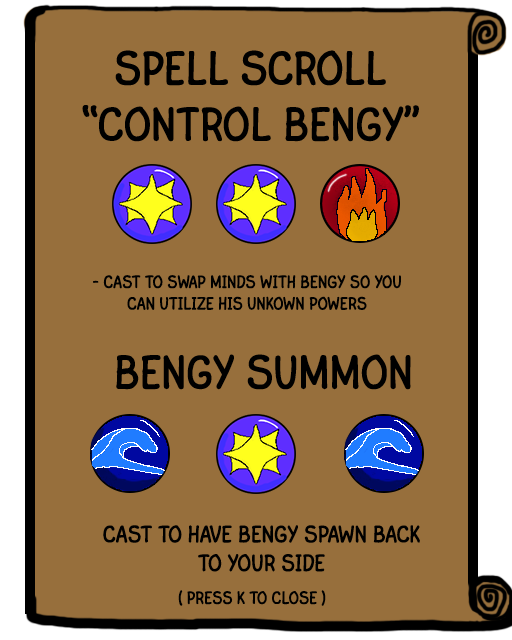
<style>
.page{position:relative;width:512px;height:640px;background:#976f3c}
.page>*{position:absolute;margin:0}
.t1{font:48px "FinaleCopyistTextExt";color:#000000;text-transform:uppercase}
.t2{font:18px "FinaleCopyistTextExt";color:#000000;text-transform:uppercase}
.t3{font:24px "FinaleCopyistTextExt";color:#000000;text-transform:uppercase}
</style>
<div class="page">
<p class="t1" style="left:82px;top:105px;width:337px;height:37px">“Control bengy”</p>
<p class="t2" style="left:93px;top:275px;width:308px;height:35px;text-align:center">- Cast to swap minds with bengy so you can utilize his unkown powers</p>
<p class="t1" style="left:116px;top:354px;width:295px;height:36px">Bengy Summon</p>
<p class="t3" style="left:103px;top:525px;width:317px;height:47px;text-align:center">cast to have bengy Spawn back to your side</p>
<p class="t2" style="left:178px;top:590px;width:148px;height:16px">( press k to close )</p>
</div>
